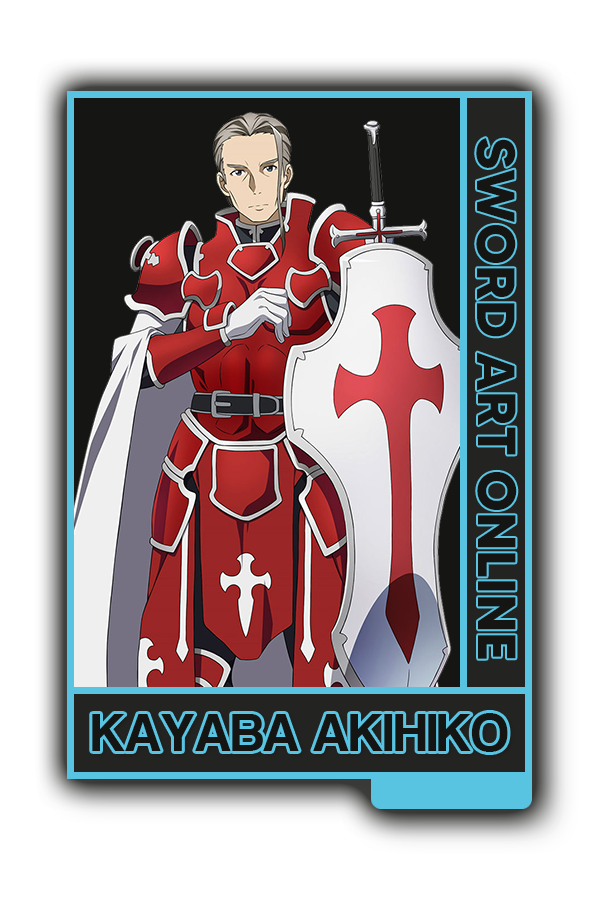
<style>
.page{position:relative;width:600px;height:900px;background:#ffffff}
.page>*{position:absolute;margin:0}
.t1{font:53.7px "MADETOMMY-Bold";color:#151514}
.t2{font:56.3px "CoolveticaRg-Regular";color:#151514}
</style>
<div class="page">
<p class="t1" style="left:476px;top:138px;width:41px;height:521px;rotate:90deg">SWORD ART ONLINE</p>
<p class="t2" style="left:92px;top:713px;width:416px;height:39px">KAYABA AKIHIKO</p>
</div>
